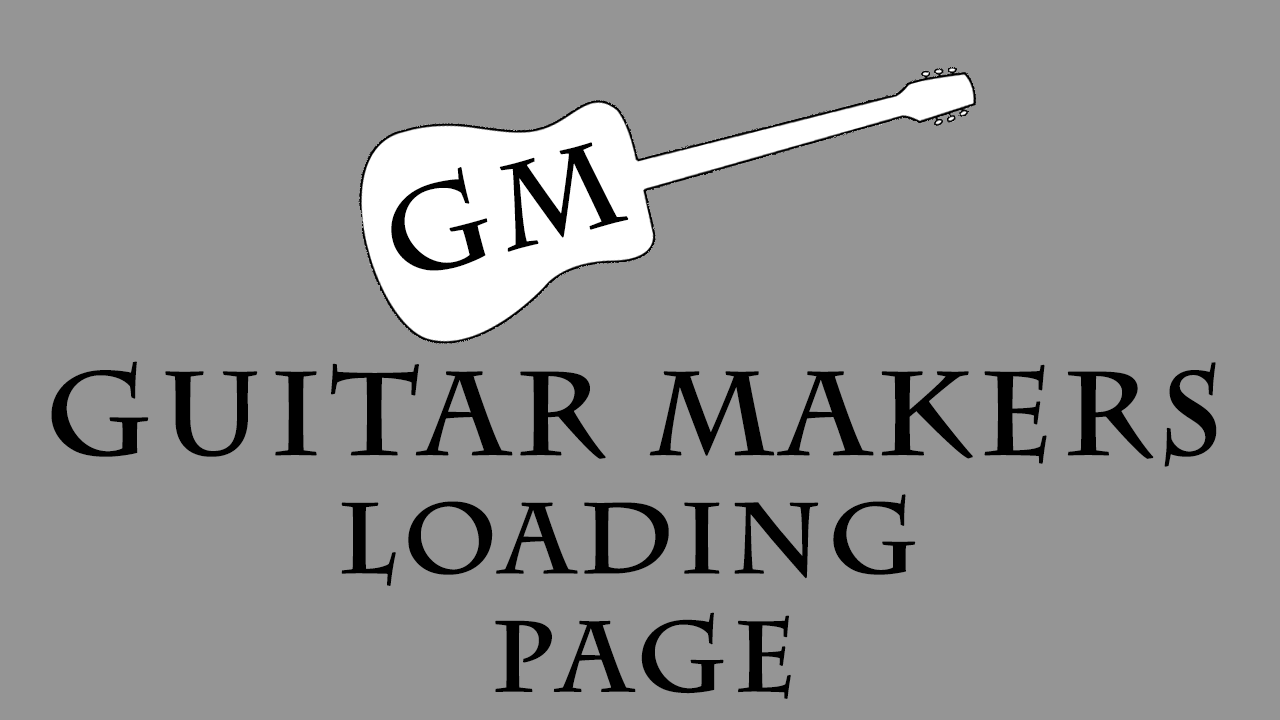
<style>
.page{position:relative;width:1280px;height:720px;background:#959595}
.page>*{position:absolute;margin:0}
.t1{font:117.2px "CharlemagneStd-Bold";letter-spacing:0.05em;color:#000000;font-weight:bold}
.t2{font:98.6px "CharlemagneStd-Bold";letter-spacing:0.05em;color:#000000;font-weight:bold}
</style>
<div class="page">
<p class="t1" style="left:391px;top:142px;width:238px;height:129px;rotate:-15deg">GM</p>
<p class="t1" style="left:51px;top:361px;width:1166px;height:106px">Guitar Makers</p>
<p class="t2" style="left:341px;top:494px;width:575px;height:205px;text-align:center">LOADING <br>PAGE</p>
</div>
